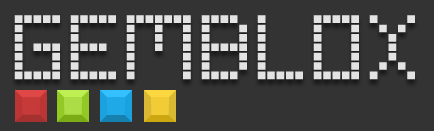
<style>
.page{position:relative;width:434px;height:131px;background:#333333}
.page>*{position:absolute;margin:0}
.t1{font:150px "blocks";color:#e3e3e3}
</style>
<div class="page">
<p class="t1" style="left:14px;top:15px;width:401px;height:65px">GEMBLOX</p>
</div>
